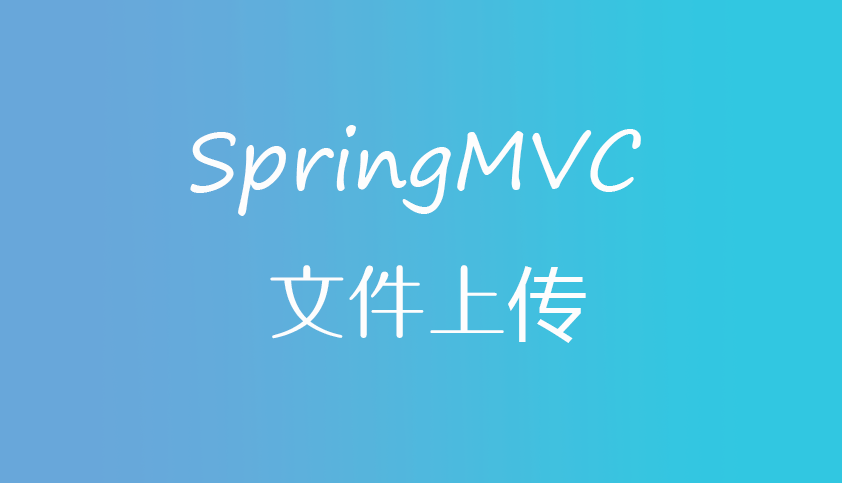
<style>
.page{position:relative;width:842px;height:483px}
.page>*{position:absolute;margin:0}
.t1{font:80px "SegoePrint";color:#fdfdfd}
.t2{font:80px "FZPSH--GB1-0";color:#fdfdfd}
.t3{font:80px "MicrosoftYaHei";color:#fdfdfd}
</style>
<div class="page">
<p class="t1" style="left:190px;top:125px;width:451px;height:218px">SpringMVC<br><span class="t2">   文件上</span><span class="t3">传</span></p>
</div>
